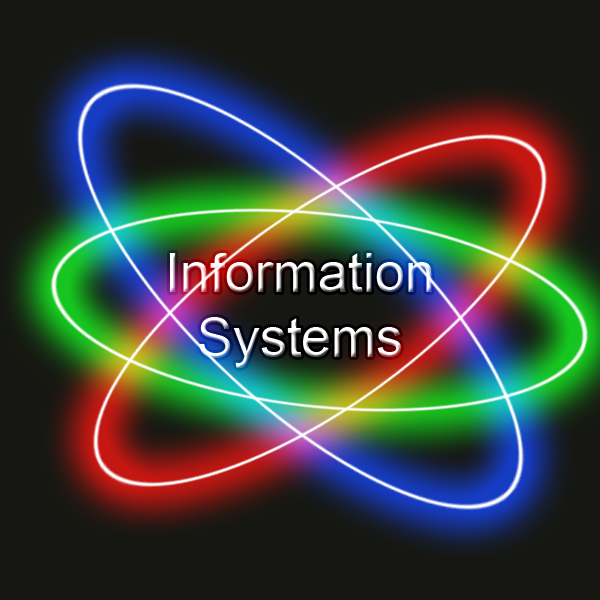
<style>
.page{position:relative;width:600px;height:600px;background:#161712}
.page>*{position:absolute;margin:0}
.t1{font:53.8px "ArialMT"}
</style>
<div class="page">
<p class="t1" style="left:170px;top:253px;width:262px;height:115px;text-align:center">Information<br>Systems</p>
</div>
